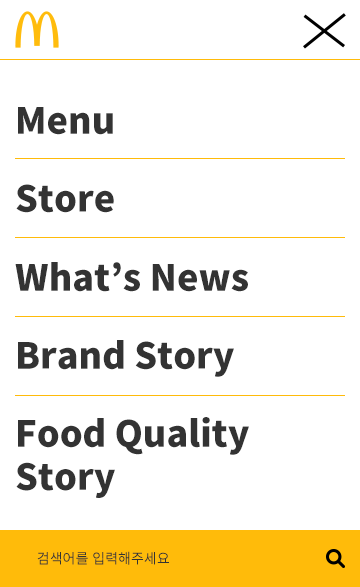
<style>
.page{position:relative;width:360px;height:587px;background:#ffffff}
.page>*{position:absolute;margin:0}
.t1{font:36px "NotoSansKR-Black";color:#333333}
.t2{font:14px "NotoSansKR-Regular";color:#333333}
</style>
<div class="page">
<p class="t1" style="left:18px;top:107px;width:95px;height:28px">Menu</p>
<p class="t1" style="left:16px;top:184px;width:98px;height:29px">Store</p>
<p class="t1" style="left:15px;top:262px;width:233px;height:30px">What’s News</p>
<p class="t1" style="left:18px;top:340px;width:216px;height:37px">Brand Story</p>
<p class="t1" style="left:16px;top:417px;width:233px;height:81px">Food Quality Story</p>
<p class="t2" style="left:37px;top:551px;width:132px;height:14px">검색어를 입력해주세요</p>
</div>
